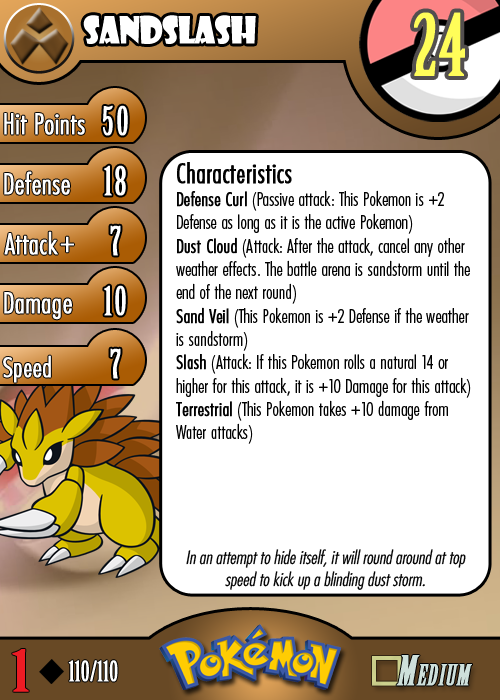
<style>
.page{position:relative;width:500px;height:700px;background:#ffffff}
.page>*{position:absolute;margin:0}
.t1{font:36.7px "ShowcardGothic-Reg";letter-spacing:-0.025em;color:#ffffff;scale:0.91 1}
.t2{font:83.3px "BirchStd";letter-spacing:0.025em;color:#fffd59;font-weight:bold}
.t3{font:27.8px "Futura-CondensedLight";color:#ffffff;font-weight:bold}
.t4{font:38.9px "BirchStd";letter-spacing:0.035em;color:#ffffff;font-weight:bold}
.t5{font:19.4px "FuturaCondensedBQ-Light";color:#010101}
.t6{font:27.8px "FuturaCondensedBQ-Light";color:#010101;font-weight:bold}
.t7{font:19.4px "FuturaCondensedBQ-Light";color:#010101;font-weight:bold}
.t8{font:30.6px "Futura-CondensedLight";color:#ffffff;font-weight:bold}
.t9{font:27.8px "FuturaCondensedBQ-Light";color:#ffffff;font-weight:bold}
.t10{font:18.1px "Futura-CondensedLight";color:#010101;font-style:italic}
.t11{font:55.6px "BirchStd";color:#ed1c24;font-weight:bold;scale:1.5 1}
.t12{font:27.8px "BirchStd";color:#ffffff;font-weight:bold}
</style>
<div class="page">
<p class="t1" style="left:83px;top:15px;width:173px;height:29px">sandslash</p>
<p class="t2" style="left:414px;top:12px;width:51px;height:64px">24</p>
<p class="t3" style="left:4px;top:113px;width:81px;height:22px">Hit Points</p>
<p class="t4" style="left:103px;top:105px;width:25px;height:31px">50</p>
<p class="t3" style="left:4px;top:171px;width:66px;height:24px">Defense</p>
<p class="t4" style="left:104px;top:165px;width:22px;height:31px">18</p>
<p class="t5" style="left:176px;top:162px;width:295px;height:282px"><span class="t6">Characteristics<br></span><span class="t7">Defense Curl</span> (Passive attack: This Pokemon is +2 Defense as long as it is the active Pokemon)<br><span class="t7">Dust Cloud</span> (Attack: After the attack, cancel any other weather effects. The battle arena is sandstorm until the end of the next round)<br><span class="t7">Sand Veil</span> (This Pokemon is +2 Defense if the weather is sandstorm)<br><span class="t7">Slash</span> (Attack: If this Pokemon rolls a natural 14 or higher for this attack, it is +10 Damage for this attack)<br><span class="t7">Terrestrial</span> (This Pokemon takes +10 damage from Water attacks)</p>
<p class="t3" style="left:4px;top:231px;width:54px;height:24px">Attack</p>
<p class="t4" style="left:110px;top:225px;width:11px;height:31px">7</p>
<p class="t8" style="left:60px;top:236px;width:14px;height:17px">+</p>
<p class="t3" style="left:4px;top:292px;width:68px;height:28px">Damage</p>
<p class="t4" style="left:104px;top:285px;width:22px;height:31px">10</p>
<p class="t4" style="left:110px;top:348px;width:11px;height:31px">7</p>
<p class="t9" style="left:3px;top:355px;width:48px;height:28px">Speed</p>
<p class="t10" style="left:186px;top:549px;width:280px;height:41px;text-align:center">In an attempt to hide itself, it will round around at top speed to kick up a blinding dust storm.</p>
<p class="t11" style="left:12px;top:649px;width:17px;height:43px">1</p>
<p class="t12" style="left:68px;top:660px;width:50px;height:22px">110/110</p>
</div>
